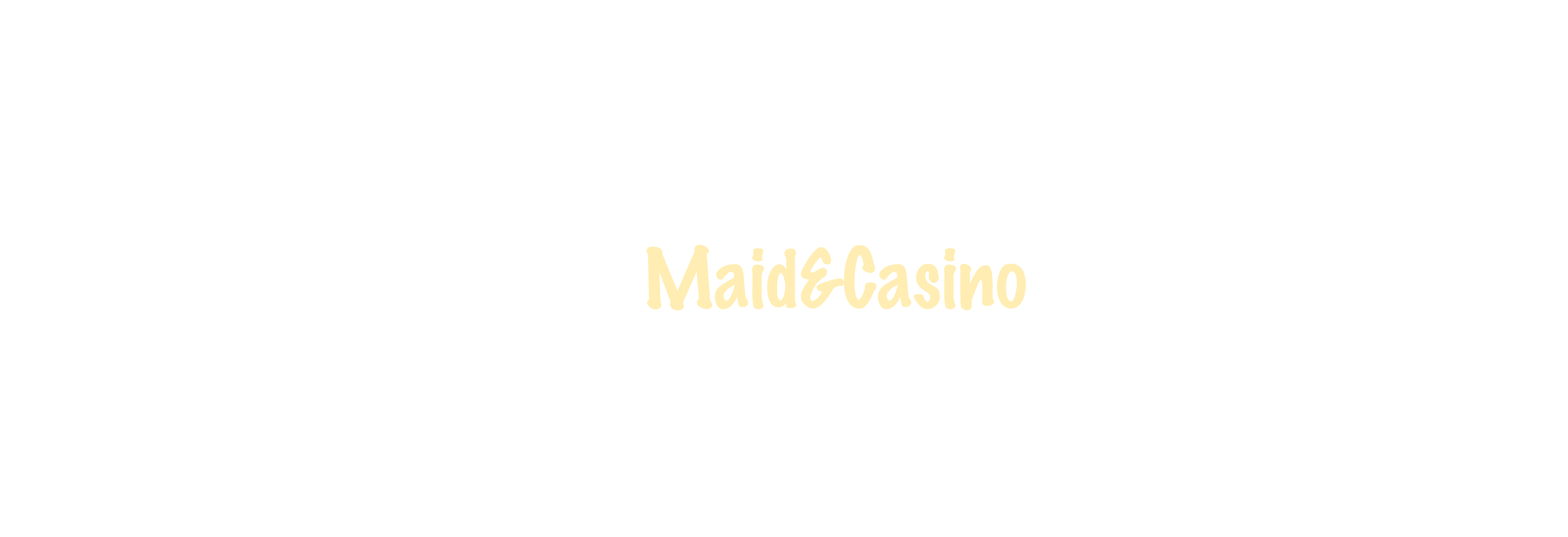
<style>
.page{position:relative;width:1568px;height:537px;background:#ffffff}
.page>*{position:absolute;margin:0}
.t1{font:75.9px "MarkerFelt-Thin";letter-spacing:0.01em;color:#ffedb3}
</style>
<div class="page">
<p class="t1" style="left:646px;top:245px;width:380px;height:66px">Maid&amp;Casino</p>
</div>
